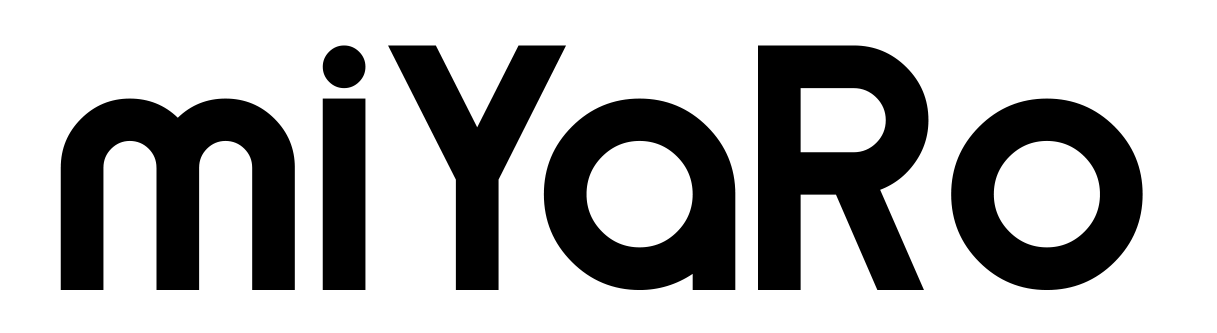
<style>
.page{position:relative;width:1217px;height:333px;background:#ffffff}
.page>*{position:absolute;margin:0}
.t1{font:300px "YaroRg-Bold";color:#000000}
</style>
<div class="page">
<p class="t1" style="left:60px;top:45px;width:1083px;height:245px">miYaRo</p>
</div>
